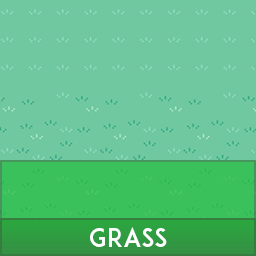
<style>
.page{position:relative;width:256px;height:256px;background:#70c8a0}
.page>*{position:absolute;margin:0}
.t1{font:26px "ADAM.CGPRO";color:#ffffff}
</style>
<div class="page">
<p class="t1" style="left:90px;top:227px;width:77px;height:20px">Grass</p>
</div>
